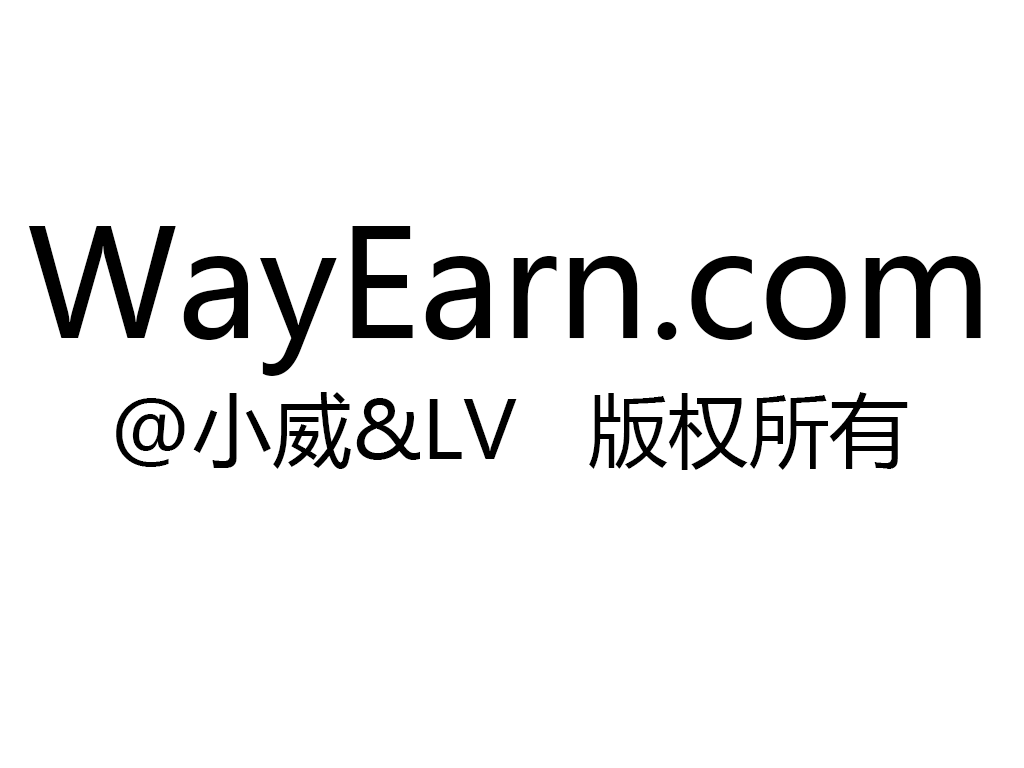
<style>
.page{position:relative;width:1024px;height:768px;background:#ffffff}
.page>*{position:absolute;margin:0}
.t1{font:80.1px/180px "MicrosoftYaHei";color:#000000}
.t2{font:148.1px/180px "MicrosoftYaHei";color:#000000}
</style>
<div class="page">
<p class="t1" style="left:28px;top:226px;width:953px;height:244px;text-align:center"><span class="t2">WayEarn.com <br></span>@小威&amp;LV   版权所有</p>
</div>
